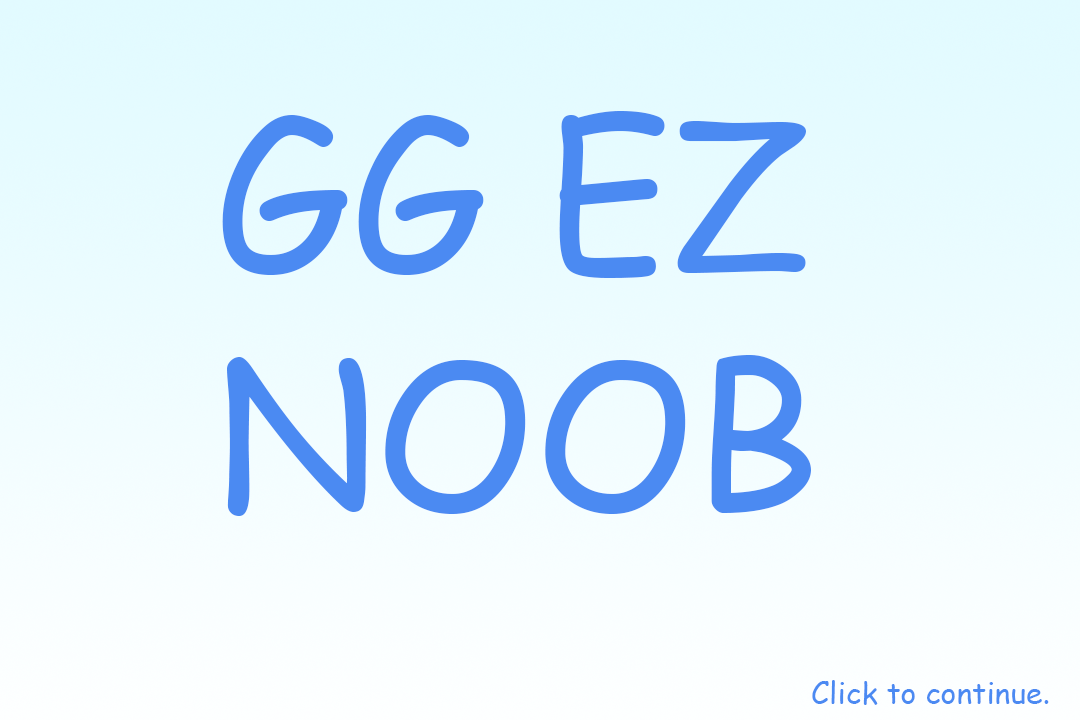
<style>
.page{position:relative;width:1080px;height:720px}
.page>*{position:absolute;margin:0}
.t1{font:200px "ComicSansMS";color:#4b8af2}
.t2{font:30px "ComicSansMS";color:#4b8af2}
</style>
<div class="page">
<p class="t1" style="left:222px;top:110px;width:589px;height:406px">GG EZ <br>NOOB</p>
<p class="t2" style="left:812px;top:680px;width:237px;height:25px">Click to continue.</p>
</div>
